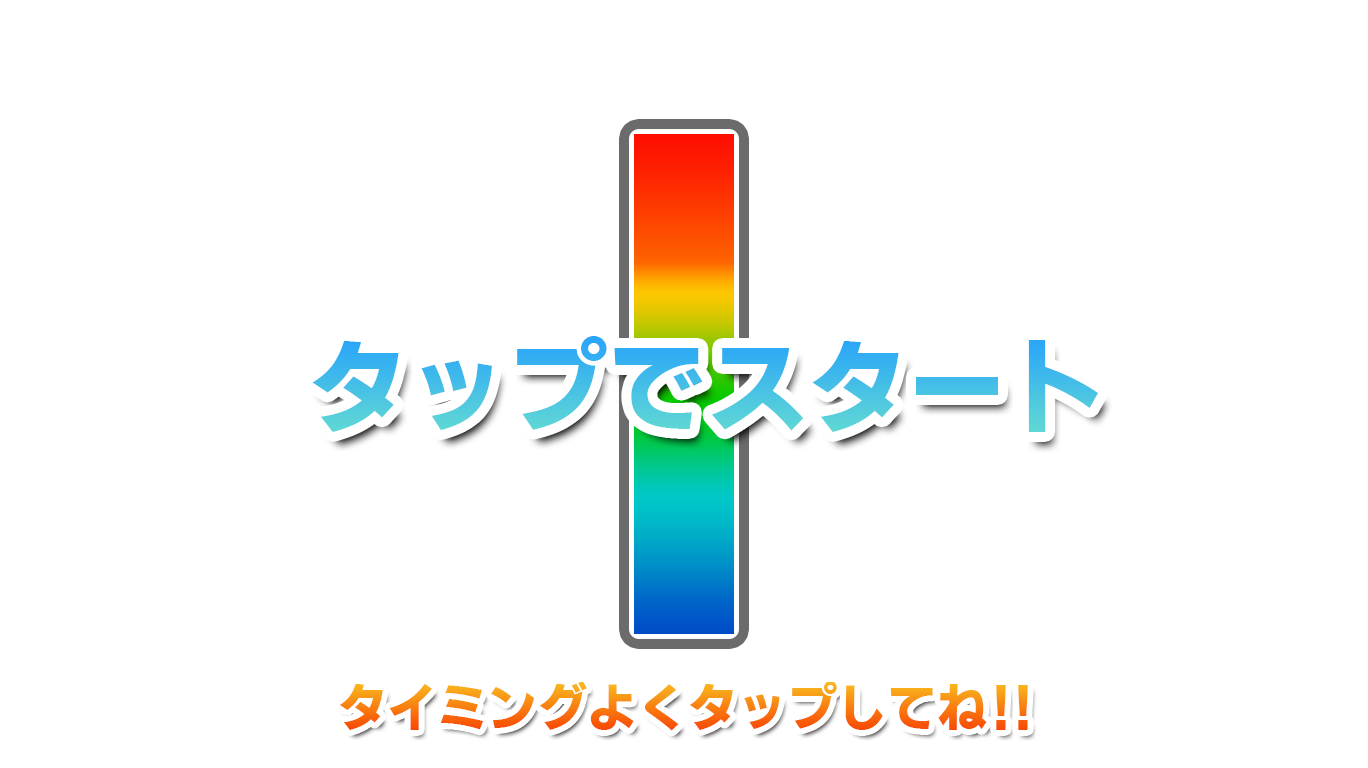
<style>
.page{position:relative;width:1368px;height:768px;background:#ffffff}
.page>*{position:absolute;margin:0}
.t1{font:100px "GenEiNuGothic-EB";color:#43bde7}
.t2{font:50px "GenEiNuGothic-EB"}
</style>
<div class="page">
<p class="t1" style="left:312px;top:336px;width:786px;height:96px">タップでスタート</p>
<p class="t2" style="left:339px;top:682px;width:689px;height:49px">タイミングよくタップしてね！！</p>
</div>
